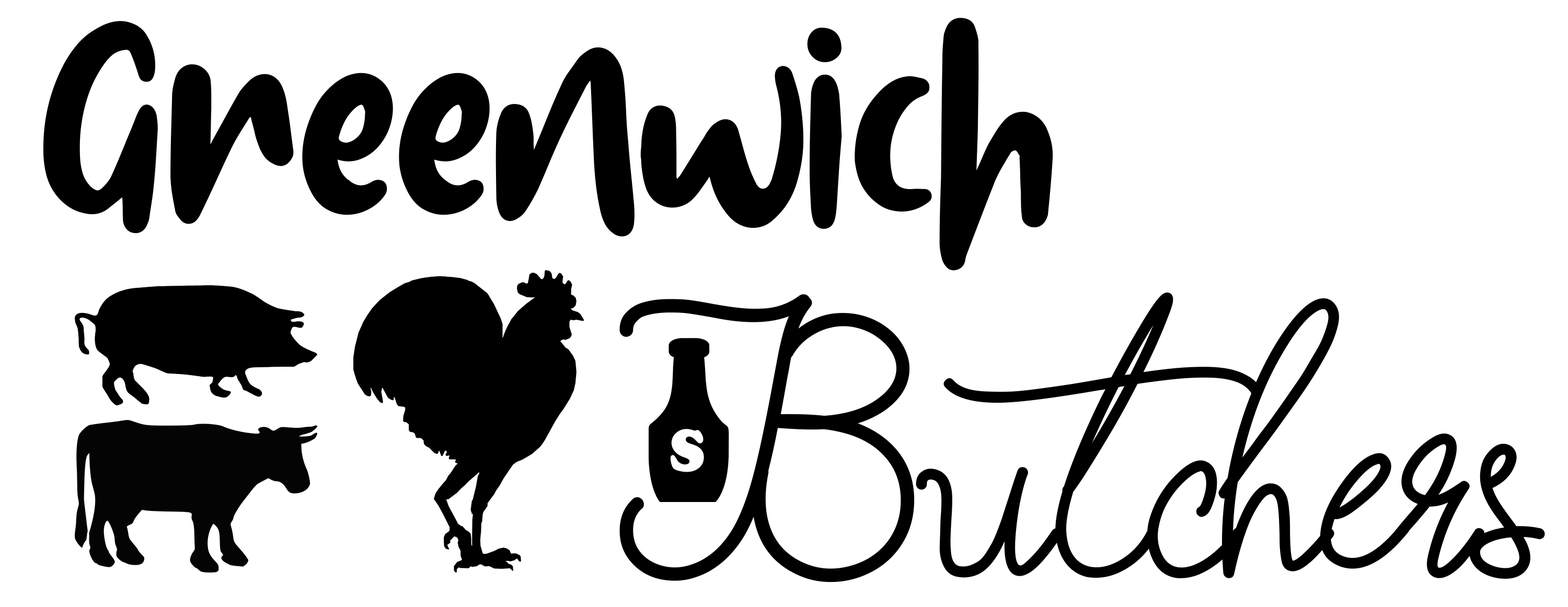
<style>
.page{position:relative;width:1568px;height:607px;background:#ffffff}
.page>*{position:absolute;margin:0}
.t1{font:283.1px "Lolitta-Bold";color:#000000}
.t2{font:326.7px "FionaLattinaRegular";color:#000000}
</style>
<div class="page">
<p class="t1" style="left:43px;top:18px;width:1010px;height:253px">Greenwich</p>
<p class="t2" style="left:619px;top:293px;width:926px;height:290px">Butchers</p>
</div>
